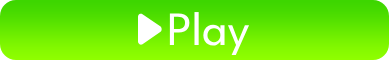
<style>
.page{position:relative;width:389px;height:60px}
.page>*{position:absolute;margin:0}
.t1{font:47.9px "LeagueSpartan-Regular";color:#ffffff}
</style>
<div class="page">
<p class="t1" style="left:169px;top:12px;width:81px;height:43px">Play</p>
</div>
